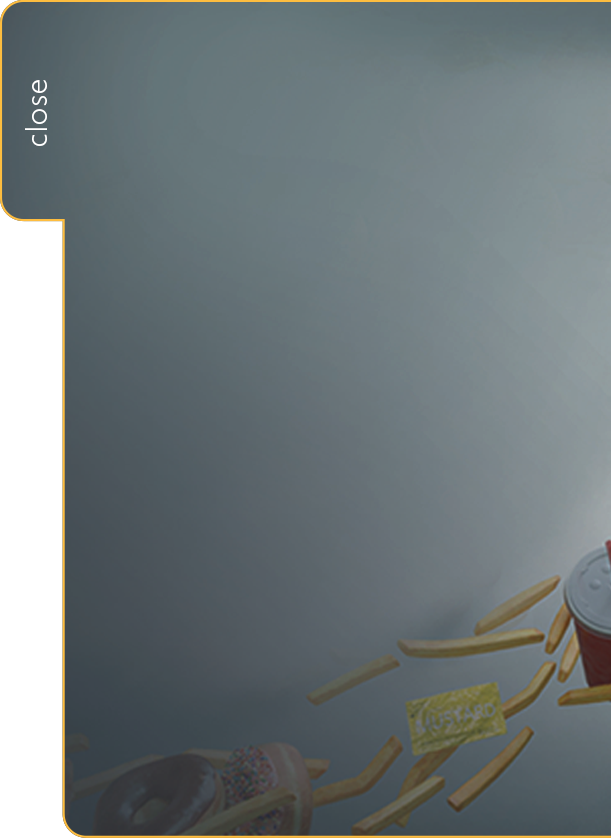
<style>
.page{position:relative;width:611px;height:838px}
.page>*{position:absolute;margin:0}
.t1{font:32px "GillSansStd-Light";letter-spacing:0.05em;color:#ffffff}
</style>
<div class="page">
<p class="t1" style="left:25px;top:80px;width:22px;height:66px;rotate:-90deg">close</p>
</div>
